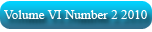
<style>
.page{position:relative;width:152px;height:32px}
.page>*{position:absolute;margin:0}
.t1{font:13px "TimesNewRomanPSMT";letter-spacing:0.02em;color:#ffffff;scale:0.97 1}
</style>
<div class="page">
<p class="t1" style="left:4px;top:10px;width:143px;height:9px">Volume VI Number 2 2010</p>
</div>
